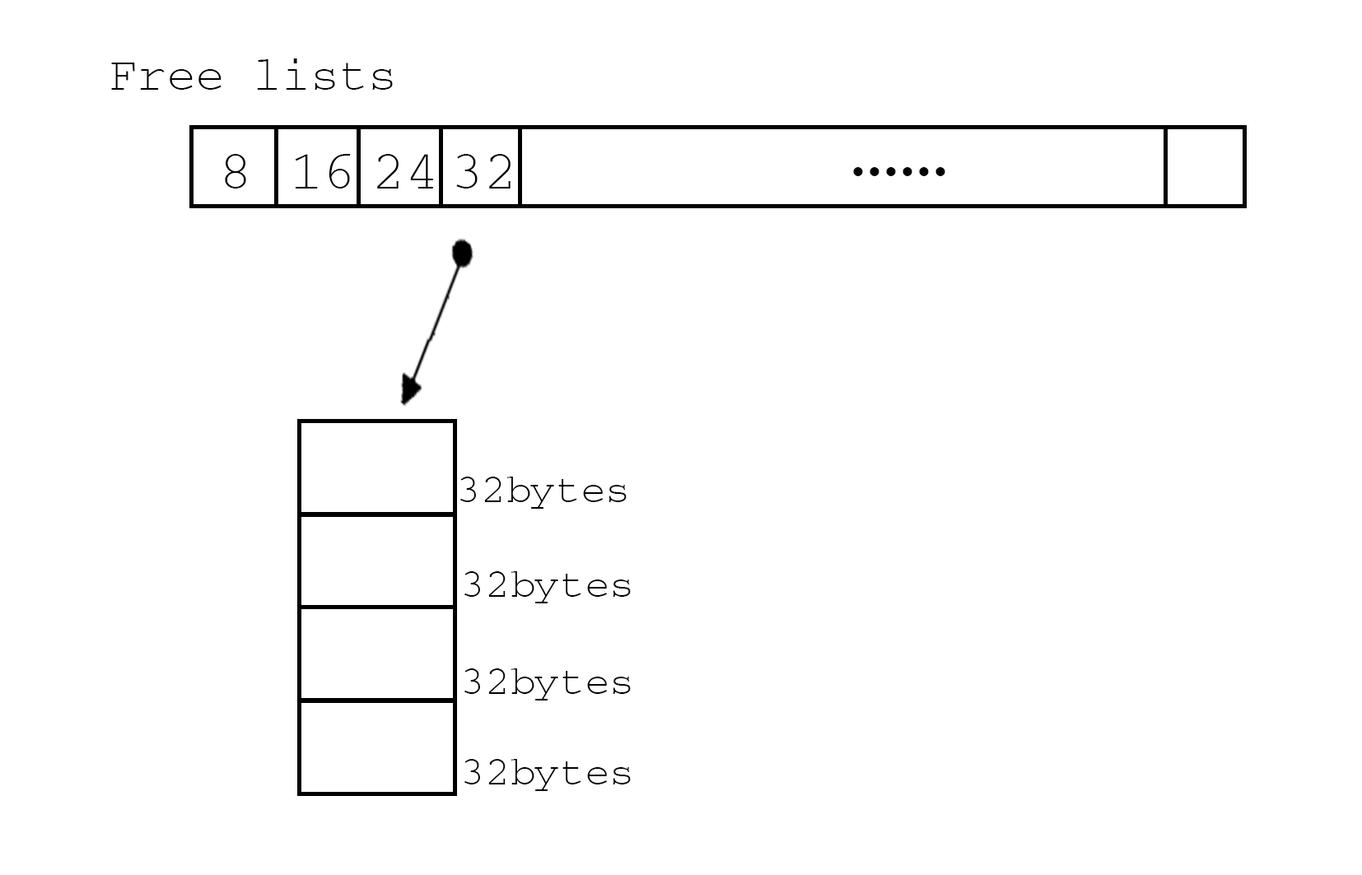
<style>
.page{position:relative;width:1362px;height:875px;background:#ffffff}
.page>*{position:absolute;margin:0}
.t1{font:48px "Courier";color:#000000}
.t2{font:54.9px "Courier";color:#000000}
.t3{font:82.4px "Courier";color:#000000}
.t4{font:41.2px "Courier";color:#000000}
</style>
<div class="page">
<p class="t1" style="left:111px;top:58px;width:282px;height:32px">Free lists</p>
<p class="t2" style="left:225px;top:154px;width:21px;height:35px">8</p>
<p class="t2" style="left:296px;top:154px;width:55px;height:35px">16</p>
<p class="t2" style="left:377px;top:154px;width:56px;height:35px">24</p>
<p class="t2" style="left:456px;top:154px;width:55px;height:35px">32</p>
<p class="t3" style="left:853px;top:167px;width:92px;height:9px">……</p>
<p class="t4" style="left:460px;top:477px;width:167px;height:32px">32bytes</p>
<p class="t4" style="left:464px;top:572px;width:167px;height:32px">32bytes</p>
<p class="t4" style="left:464px;top:669px;width:167px;height:32px">32bytes</p>
<p class="t4" style="left:464px;top:759px;width:167px;height:32px">32bytes</p>
</div>
